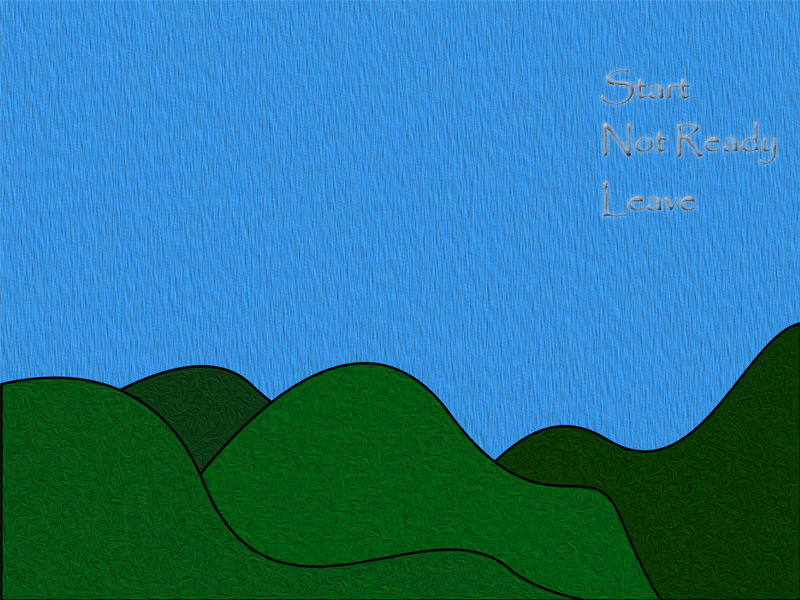
<style>
.page{position:relative;width:800px;height:600px}
.page>*{position:absolute;margin:0}
.t1{font:36px "Papyrus-Regular"}
</style>
<div class="page">
<p class="t1" style="left:600px;top:69px;width:91px;height:36px">Start</p>
<p class="t1" style="left:603px;top:121px;width:173px;height:43px">Not Ready</p>
<p class="t1" style="left:602px;top:181px;width:94px;height:36px">Leave</p>
</div>
